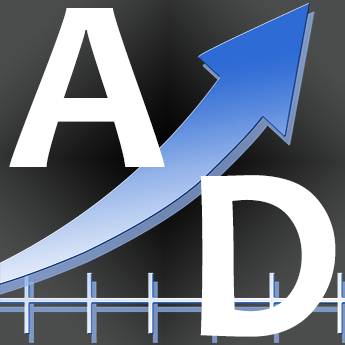
<style>
.page{position:relative;width:345px;height:345px}
.page>*{position:absolute;margin:0}
.t1{font:250px "Candara-Bold";color:#ffffff}
</style>
<div class="page">
<p class="t1" style="left:9px;top:8px;width:156px;height:159px">A</p>
<p class="t1" style="left:200px;top:175px;width:136px;height:162px">D</p>
</div>
